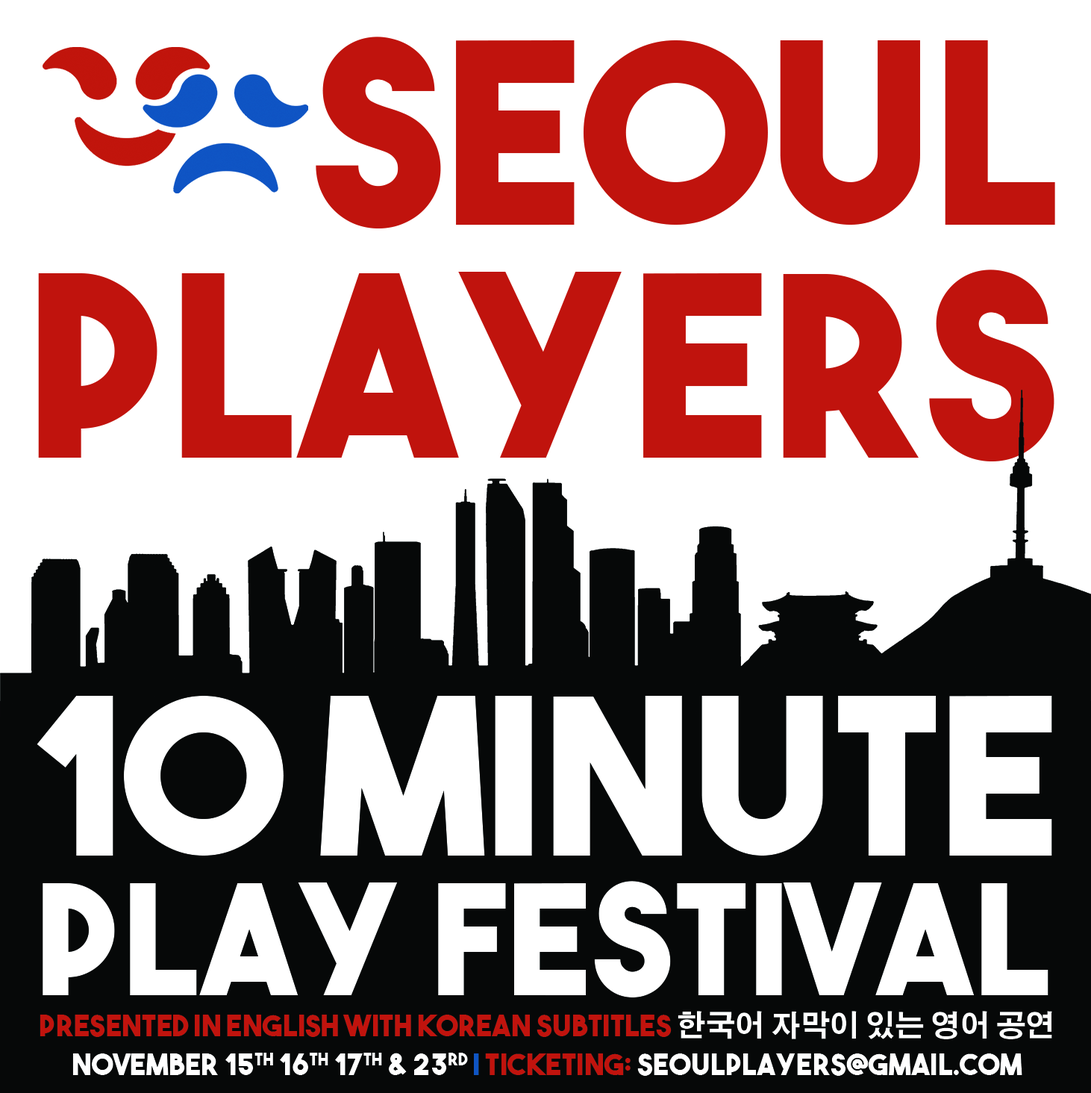
<style>
.page{position:relative;width:1091px;height:1093px;background:#ffffff}
.page>*{position:absolute;margin:0}
.t1{font:250.9px/233.3px "TheBoldFont";color:#c0130d}
.t2{font:217px "TheBoldFont";color:#ffffff}
.t3{font:152.4px "TheBoldFont";color:#ffffff}
.t4{font:29.4px/38.9px "TheBoldFont";color:#c0130d}
.t5{font:29.4px/38.9px "AdobeGothicStd-Bold";color:#ffffff}
.t6{font:29.4px/38.9px "TheBoldFont";color:#ffffff}
.t7{font:29.4px/38.9px "TheBoldFont";color:#0f55c4}
</style>
<div class="page">
<p class="t1" style="left:38px;top:37px;width:1017px;height:424px;text-align:right">Seoul<br>Players</p>
<p class="t2" style="left:37px;top:696px;width:1015px;height:159px">10 minute</p>
<p class="t3" style="left:43px;top:881px;width:1006px;height:116px">play festival</p>
<p class="t4" style="left:40px;top:1011px;width:1012px;height:65px;text-align:center">presented in english with korean subtitles <span class="t5">한국어 자막이 있는 영어 공연<br></span><span class="t6">November 15th 16th 17th &amp; 23rd</span><span class="t7"> | </span>ticketing: <span class="t6">seoulplayers@gmail.com</span></p>
</div>
